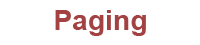
<style>
.page{position:relative;width:200px;height:45px;background:#ffffff}
.page>*{position:absolute;margin:0}
.t1{font:27.9px "Arial-BoldMT";color:#a24242}
</style>
<div class="page">
<p class="t1" style="left:55px;top:10px;width:91px;height:26px">Paging</p>
</div>
